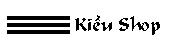
<style>
.page{position:relative;width:182px;height:41px;background:#ffffff}
.page>*{position:absolute;margin:0}
.t1{font:18px "UVNDungDan";color:#000000}
</style>
<div class="page">
<p class="t1" style="left:75px;top:15px;width:85px;height:20px">Kiều Shop</p>
</div>
